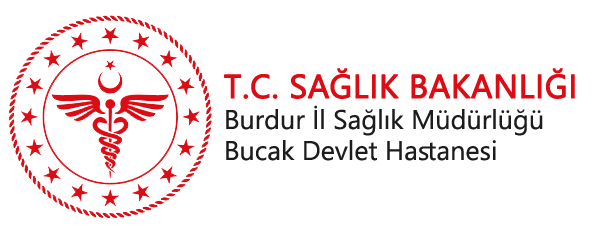
<style>
.page{position:relative;width:600px;height:232px;background:#ffffff}
.page>*{position:absolute;margin:0}
.t1{font:33px "SegoeUI";color:#dc0c15;font-weight:bold}
.t2{font:27px/31px "SegoeUI";color:#1c1c1c}
</style>
<div class="page">
<p class="t1" style="left:224px;top:68px;width:351px;height:31px">T.C. SAĞLIK BAKANLIĞI</p>
<p class="t2" style="left:226px;top:105px;width:317px;height:56px">Burdur İl Sağlık Müdürlüğü<br>Bucak Devlet Hastanesi</p>
</div>
